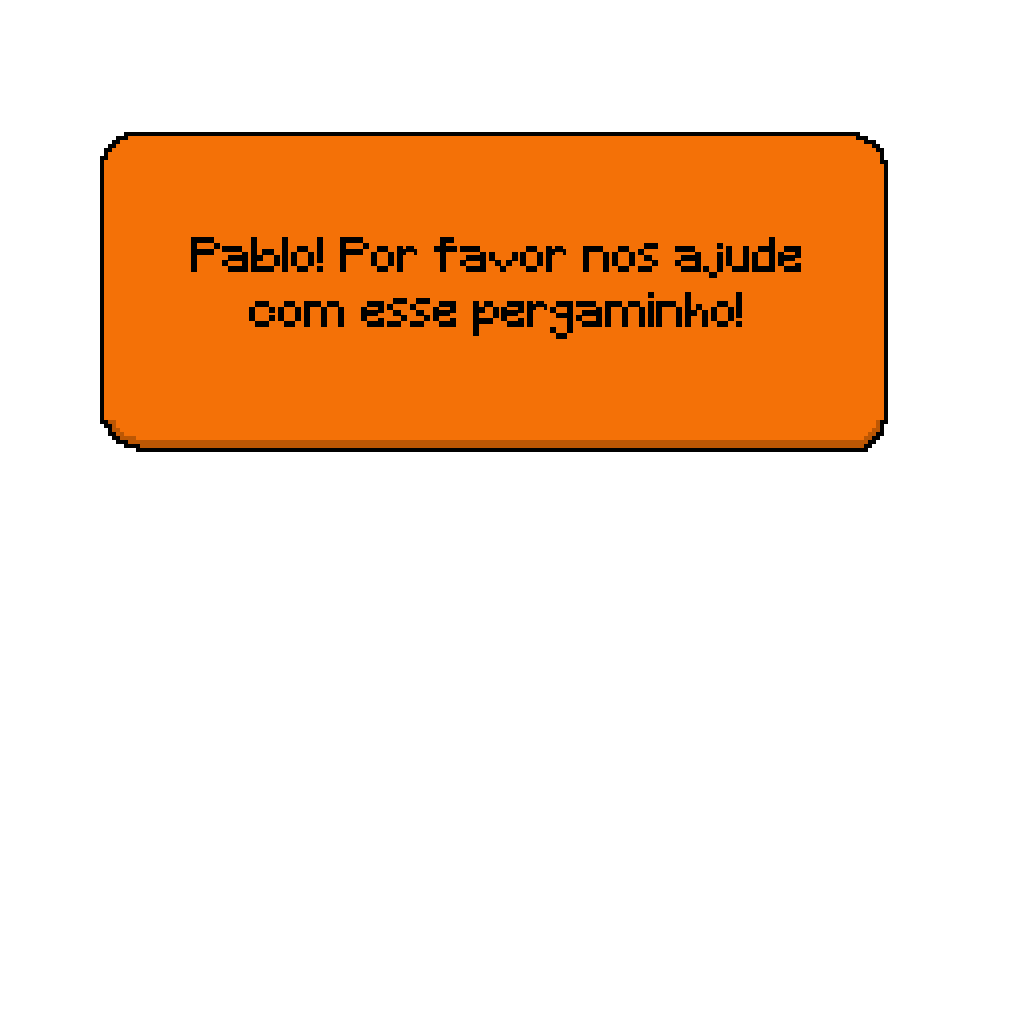
<style>
.page{position:relative;width:1024px;height:1024px;background:#ffffff}
.page>*{position:absolute;margin:0}
.t1{font:45.8px "Minecraft";color:#000000}
</style>
<div class="page">
<p class="t1" style="left:191px;top:237px;width:610px;height:102px;text-align:center">Pablo! Por favor nos ajude com esse pergaminho!</p>
</div>
